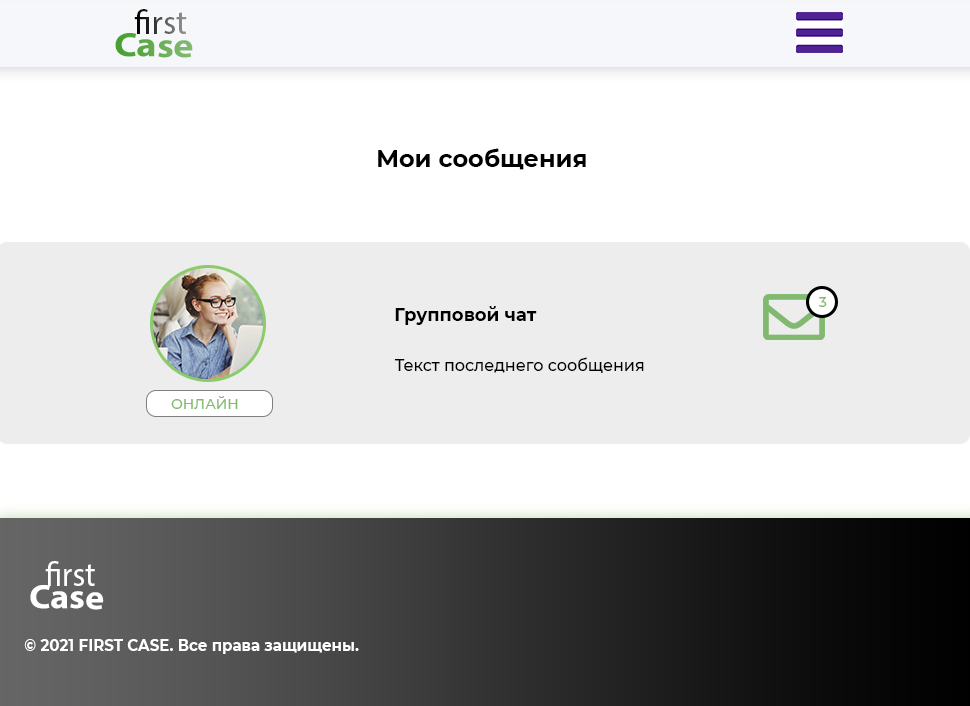
<style>
.page{position:relative;width:970px;height:706px;background:#ffffff}
.page>*{position:absolute;margin:0}
.t1{font:34px "MyriadPro-Regular"}
.t2{font:34px "MyriadPro-Bold";scale:1.13 1}
.t3{font:34px "MyriadPro-Regular";scale:1.13 1}
.t4{font:24px "Montserrat-Bold";color:#000000}
.t5{font:14.3px "Montserrat-Medium";color:#82b970}
.t6{font:18px "Montserrat-Bold";color:#000000}
.t7{font:16px "Montserrat-Medium";color:#000000}
.t8{font:14px "Montserrat-Medium";color:#82b970}
.t9{font:34px "MyriadPro-Regular";color:#ffffff;scale:0.94 1}
.t10{font:34px "MyriadPro-Bold";color:#ffffff;scale:1.06 1}
.t11{font:34px "MyriadPro-Regular";color:#ffffff;scale:1.06 1}
.t12{font:16px "Montserrat-Bold";color:#ffffff;scale:0.94 1}
</style>
<div class="page">
<p class="t1" style="left:134px;top:9px;width:53px;height:25px">first</p>
<p class="t2" style="left:115px;top:33px;width:78px;height:25px;rotate:1deg"><span class="t3">       </span>Case</p>
<p class="t4" style="left:378px;top:148px;width:208px;height:22px">Мои сообщения</p>
<p class="t5" style="left:818px;top:297px;width:9px;height:10px">3</p>
<p class="t6" style="left:395px;top:306px;width:142px;height:19px">Групповой чат</p>
<p class="t7" style="left:394px;top:357px;width:250px;height:16px">Текст последнего сообщения</p>
<p class="t8" style="left:171px;top:396px;width:67px;height:13px">ОНЛАЙН</p>
<p class="t9" style="left:45px;top:561px;width:50px;height:25px">first</p>
<p class="t10" style="left:30px;top:585px;width:74px;height:25px;rotate:1deg"><span class="t11">       </span>Case</p>
<p class="t12" style="left:24px;top:639px;width:335px;height:15px">© 2021 FIRST CASE. Все права защищены.</p>
</div>
